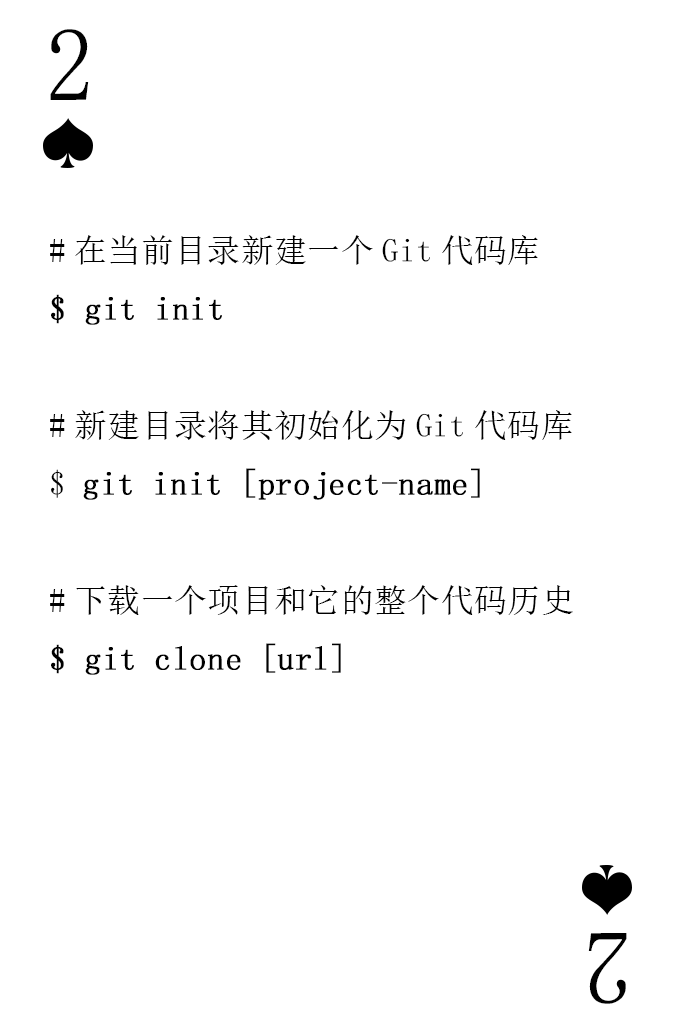
<style>
.page{position:relative;width:673px;height:1028px;background:#ffffff}
.page>*{position:absolute;margin:0}
.t1{font:104.2px "SimSun-ExtB";color:#010101;scale:0.93 1}
.t2{font:33.3px "SimSun-ExtB";color:#000000;font-weight:bold}
.t3{font:33.3px "SimSun";color:#000000}
.t4{font:33.3px "SimSun-ExtB";color:#000000}
</style>
<div class="page">
<p class="t1" style="left:50px;top:29px;width:39px;height:71px">2</p>
<p class="t2" style="left:50px;top:235px;width:523px;height:440px"><span class="t3">#在当前目录新建一个</span><span class="t4">Git</span><span class="t3">代码库<br></span>$ git init<br><br><span class="t3">#新建目录将其初始化为</span><span class="t4">Git</span><span class="t3">代码库<br></span><span class="t4">$ </span>git init [project-name]<br><br><span class="t3">#下载一个项目和它的整个代码历史<br></span>$ git clone [url]</p>
<p class="t1" style="left:588px;top:933px;width:39px;height:71px;rotate:180deg">2</p>
</div>
